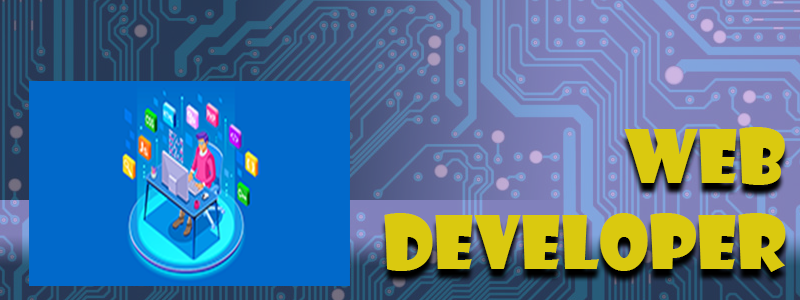
<style>
.page{position:relative;width:800px;height:300px}
.page>*{position:absolute;margin:0}
.t1{font:72px "ShowcardGothic-Reg";color:#dac90f}
</style>
<div class="page">
<p class="t1" style="left:384px;top:127px;width:402px;height:145px;text-align:right">WEB<br>DEVELOPER</p>
</div>
